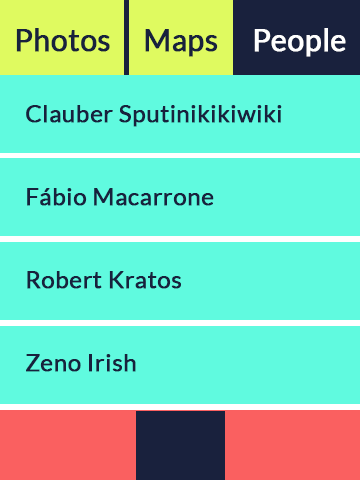
<style>
.page{position:relative;width:360px;height:480px;background:#60fadf}
.page>*{position:absolute;margin:0}
.t1{font:29.8px "Lato-Regular";color:#18213d;font-weight:bold}
.t2{font:29.8px "Lato-Regular";color:#ffffff;font-weight:bold}
.t3{font:24px "Lato-Regular";color:#18213d;font-weight:bold}
</style>
<div class="page">
<p class="t1" style="left:16px;top:28px;width:94px;height:24px">Photos</p>
<p class="t1" style="left:145px;top:29px;width:73px;height:28px">Maps</p>
<p class="t2" style="left:254px;top:28px;width:92px;height:29px">People</p>
<p class="t3" style="left:26px;top:105px;width:256px;height:22px">Clauber Sputinikikiwiki</p>
<p class="t3" style="left:27px;top:188px;width:187px;height:18px">Fábio Macarrone</p>
<p class="t3" style="left:27px;top:271px;width:154px;height:18px">Robert Kratos</p>
<p class="t3" style="left:26px;top:354px;width:110px;height:18px">Zeno Irish</p>
</div>
